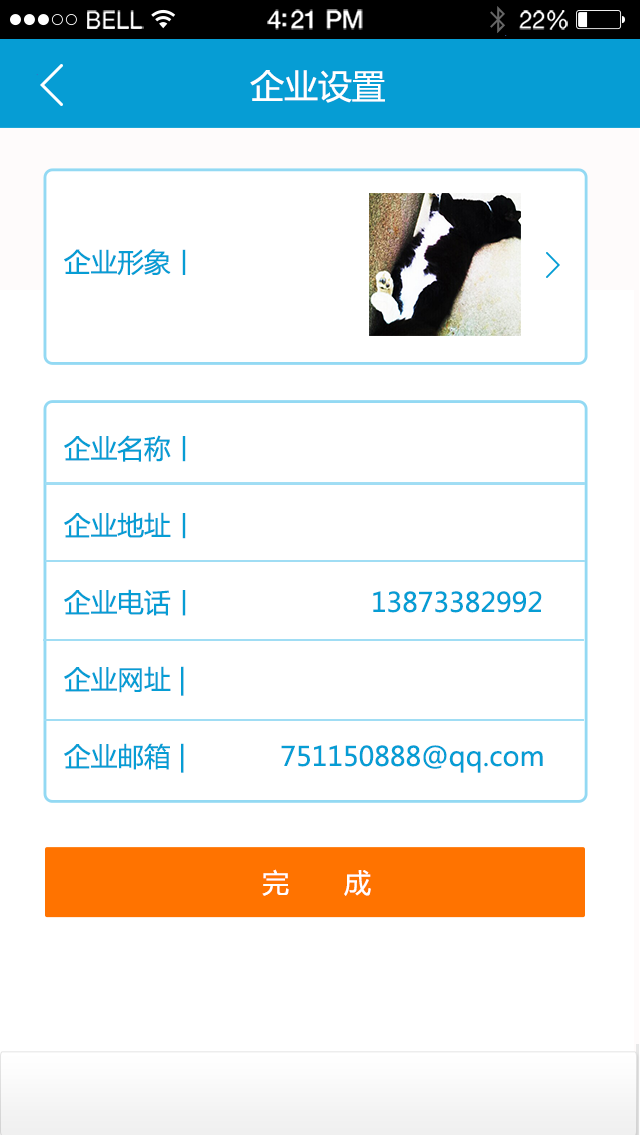
<style>
.page{position:relative;width:640px;height:1135px;background:#ffffff}
.page>*{position:absolute;margin:0}
.t1{font:23.1px "HelveticaNeue";letter-spacing:0.02em;color:#ffffff}
.t2{font:25.1px "HelveticaNeue-Medium";letter-spacing:-0.02em;color:#ffffff}
.t3{font:24.1px "HelveticaNeue";letter-spacing:-0.02em;color:#ffffff}
.t4{font:33.8px "MicrosoftYaHei";color:#ffffff}
.t5{font:18px "MicrosoftYaHei";color:#8d9695}
.t6{font:26.7px "MicrosoftYaHei";color:#069dd4}
.t7{font:26.7px/4px "MicrosoftYaHei";color:#069dd4}
.t8{font:26.7px "MicrosoftYaHei";color:#ffffff}
</style>
<div class="page">
<p class="t1" style="left:87px;top:10px;width:57px;height:19px">BELL</p>
<p class="t2" style="left:267px;top:9px;width:96px;height:21px">4:21 PM</p>
<p class="t3" style="left:519px;top:10px;width:49px;height:20px">22%</p>
<p class="t4" style="left:250px;top:70px;width:135px;height:33px"><span class="t5">  </span>企业设置</p>
<p class="t6" style="left:64px;top:249px;width:122px;height:27px">企业形象丨</p>
<p class="t7" style="left:64px;top:435px;width:479px;height:338px">企业名称丨                            <br><br><br><br><br><br><br><br><br><br><br>企业地址丨         <br><br><br><br><br><br><br><br><br><br><br>企业电话丨                      13873382992 <br><br><br><br><br><br><br><br><br><br><br>企业网址 |<br><br><br><br><br><br><br><br><br><br><br>企业邮箱 |            751150888@qq.com</p>
<p class="t8" style="left:262px;top:869px;width:109px;height:27px">完       成</p>
</div>
